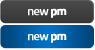
<style>
.page{position:relative;width:95px;height:50px}
.page>*{position:absolute;margin:0}
.t1{font:12px "TitilliumText22L-Regular";letter-spacing:-0.05em;color:#ffffff;font-weight:bold}
.t2{font:12px "TitilliumText22L-XBold";letter-spacing:-0.05em;color:#ffffff;font-weight:bold}
</style>
<div class="page">
<p class="t1" style="left:28px;top:8px;width:39px;height:10px">new <span class="t2">pm</span></p>
<p class="t1" style="left:28px;top:33px;width:39px;height:10px">new <span class="t2">pm</span></p>
</div>
